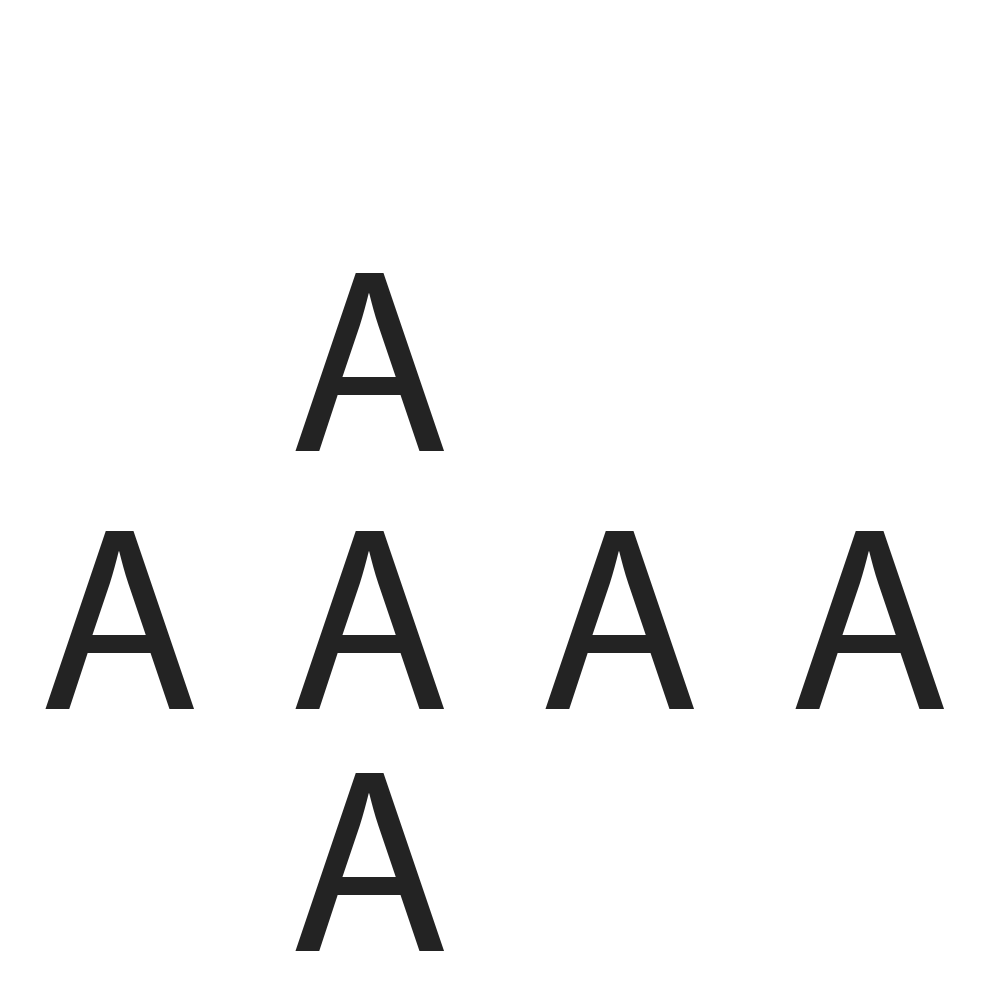
<style>
.page{position:relative;width:1000px;height:1000px;background:#ffffff}
.page>*{position:absolute;margin:0}
.t1{font:263.5px "MyriadPro-Regular";color:#232323}
.t2{font:63.2px "MyriadPro-Regular";color:#232323}
</style>
<div class="page">
<p class="t1" style="left:295px;top:273px;width:149px;height:178px">A</p>
<p class="t1" style="left:45px;top:531px;width:149px;height:178px">A</p>
<p class="t2" style="left:295px;top:531px;width:149px;height:178px">A</p>
<p class="t1" style="left:545px;top:531px;width:149px;height:178px">A</p>
<p class="t1" style="left:795px;top:531px;width:149px;height:178px">A</p>
<p class="t1" style="left:295px;top:773px;width:149px;height:178px">A</p>
</div>
